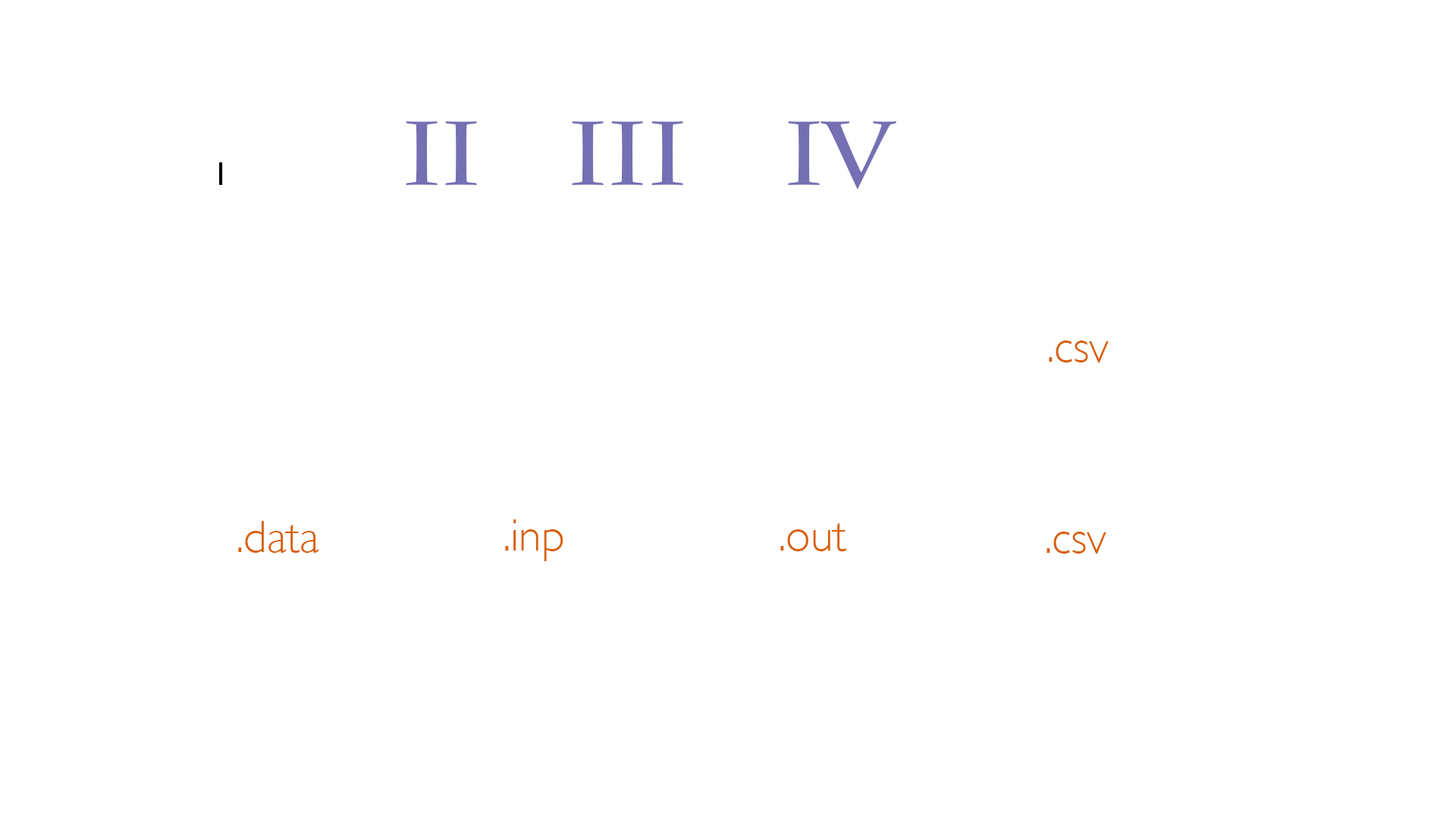
<style>
.page{position:relative;width:1456px;height:819px;background:#ffffff}
.page>*{position:absolute;margin:0}
.t1{font:91px "CharlemagneStd-Bold";color:#7570b3}
.t2{font:36.4px "Calibri";color:#000000}
.t3{font:45.5px "GillSans-Light";color:#d95f02}
</style>
<div class="page">
<p class="t1" style="left:406px;top:121px;width:71px;height:64px">II</p>
<p class="t1" style="left:572px;top:121px;width:111px;height:64px">III</p>
<p class="t1" style="left:788px;top:121px;width:108px;height:69px">IV</p>
<p class="t2" style="left:219px;top:162px;width:4px;height:23px">I</p>
<p class="t3" style="left:1049px;top:340px;width:60px;height:22px">.csv</p>
<p class="t3" style="left:238px;top:521px;width:81px;height:32px">.data</p>
<p class="t3" style="left:505px;top:519px;width:58px;height:42px">.inp</p>
<p class="t3" style="left:780px;top:523px;width:66px;height:28px">.out</p>
<p class="t3" style="left:1046px;top:532px;width:60px;height:22px">.csv</p>
</div>
